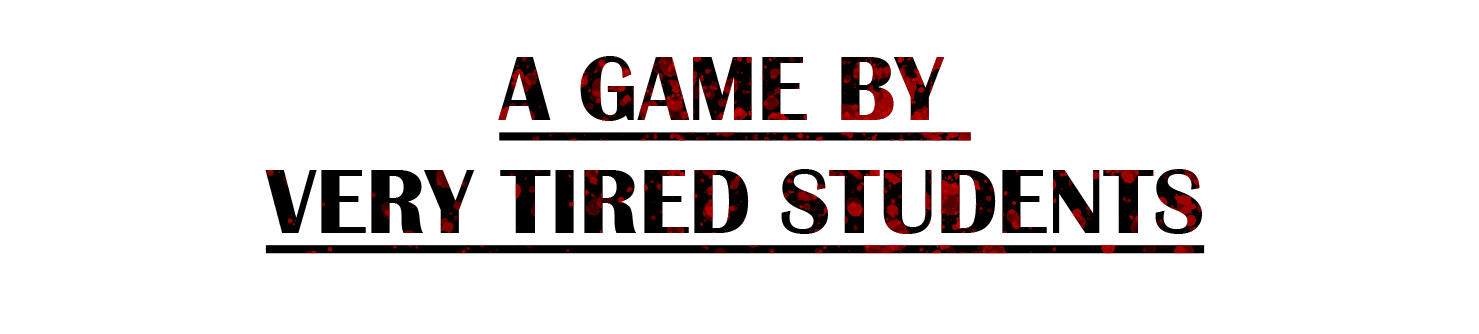
<style>
.page{position:relative;width:1479px;height:334px;background:#ffffff}
.page>*{position:absolute;margin:0}
.t1{font:94px "BritannicBold";color:#000000;text-transform:uppercase;text-decoration:underline}
</style>
<div class="page">
<p class="t1" style="left:265px;top:56px;width:940px;height:198px;text-align:center">A game by <br>Very Tired Students</p>
</div>
